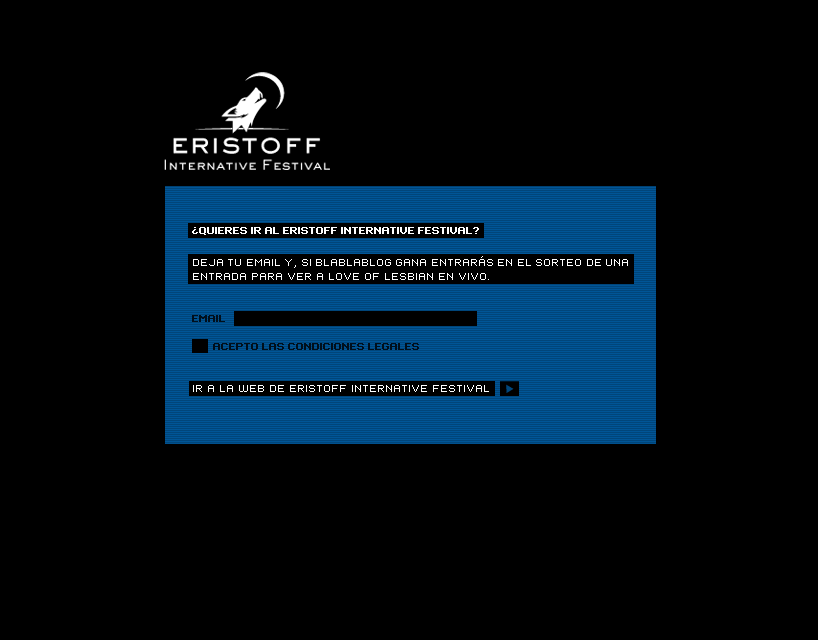
<style>
.page{position:relative;width:818px;height:640px;background:#000000}
.page>*{position:absolute;margin:0}
.t1{font:8px/14px "Standard0763";color:#ffffff;text-transform:uppercase}
.t2{font:8px/14px "Standard0756";color:#ffffff;text-transform:uppercase}
.t3{font:8px/14px "Standard0754";color:#ffffff;text-transform:uppercase}
.t4{font:8px/14px "Standard0763";color:#000f1c;text-transform:uppercase}
</style>
<div class="page">
<p class="t1" style="left:192px;top:227px;width:287px;height:8px;text-align:justify">¿Quieres ir al Eristoff Internative Festival?<br><span class="t2">.</span></p>
<p class="t3" style="left:192px;top:256px;width:436px;height:136px;text-align:justify">Deja tu email y, si blablablog gana entrarás en el sorteo de una entrada para ver a Love of Lesbian en vivo. <br><br><span class="t4"><br>Email<br><br>       Acepto las condiciones legales<br></span><br><br>Ir a la web de Eristoff Internative Festival</p>
</div>
